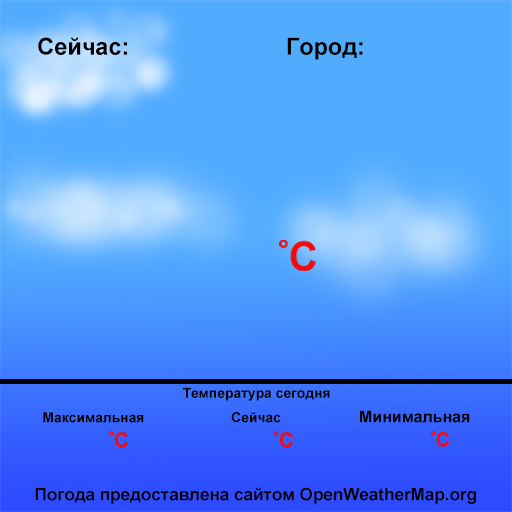
<style>
.page{position:relative;width:512px;height:512px;background:#51abff}
.page>*{position:absolute;margin:0}
.t1{font:23.5px "Arial-BoldMT";color:#000000}
.t2{font:13.9px "Arial-BoldMT";color:#000000}
.t3{font:16px "Arial-BoldMT";color:#000000}
.t4{font:17.1px "Arial-BoldMT";color:#000000}
</style>
<div class="page">
<p class="t1" style="left:38px;top:37px;width:89px;height:18px">Сейчас:</p>
<p class="t1" style="left:287px;top:37px;width:76px;height:23px">Город:</p>
<p class="t2" style="left:183px;top:387px;width:147px;height:14px">Температура сегодня</p>
<p class="t2" style="left:43px;top:412px;width:101px;height:11px">Максимальная</p>
<p class="t2" style="left:231px;top:412px;width:50px;height:11px">Сейчас</p>
<p class="t3" style="left:360px;top:410px;width:110px;height:13px">Минимальная</p>
<p class="t4" style="left:35px;top:487px;width:441px;height:17px">Погода предоставлена сайтом OpenWeatherMap.org</p>
</div>
